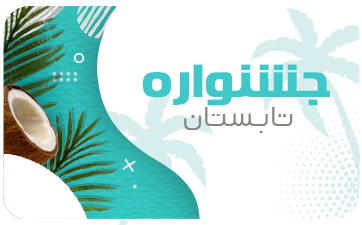
<style>
.page{position:relative;width:362px;height:225px;background:#ffffff}
.page>*{position:absolute;margin:0}
.t1{font:46.5px "FarFanni";color:#3ec8c9}
.t2{font:42px "Fanavari-Regular";color:#86867a}
</style>
<div class="page">
<p class="t1" style="left:142px;top:64px;width:188px;height:42px">جشنواره</p>
<p class="t2" style="left:184px;top:107px;width:109px;height:26px">تابستان</p>
</div>
